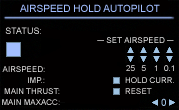
<style>
.page{position:relative;width:179px;height:110px;background:#020000}
.page>*{position:absolute;margin:0}
.t1{font:10px "ArialMT";color:#a2beff;font-variant:small-caps}
.t2{font:9px "ArialMT";font-variant:small-caps}
.t3{font:8px "ArialMT"}
.t4{font:8px "ArialMT";color:#e6e5e5;font-variant:small-caps}
.t5{font:8px "ArialMT";font-variant:small-caps}
.t6{font:8px "ArialMT";color:#e9e9e9;font-variant:small-caps}
.t7{font:8px "ArialMT";color:#cacaca;font-variant:small-caps}
.t8{font:10px "ArialMT";color:#9fc3e3;font-variant:small-caps}
</style>
<div class="page">
<p class="t1" style="left:20px;top:4px;width:140px;height:8px">AIRSPEED HOLD AUTOPILOT</p>
<p class="t2" style="left:5px;top:27px;width:36px;height:7px">STATUS:</p>
<p class="t3" style="left:106px;top:37px;width:59px;height:6px">SET AIRSPEED</p>
<p class="t4" style="left:2px;top:66px;width:43px;height:6px">AIRSPEED:</p>
<p class="t5" style="left:28px;top:77px;width:17px;height:6px">IMP.:</p>
<p class="t5" style="left:4px;top:88px;width:56px;height:6px">MAIN THRUST:</p>
<p class="t6" style="left:2px;top:99px;width:58px;height:6px">MAIN MAXAC<span class="t7">C:</span></p>
<p class="t8" style="left:161px;top:98px;width:5px;height:8px">0</p>
</div>
